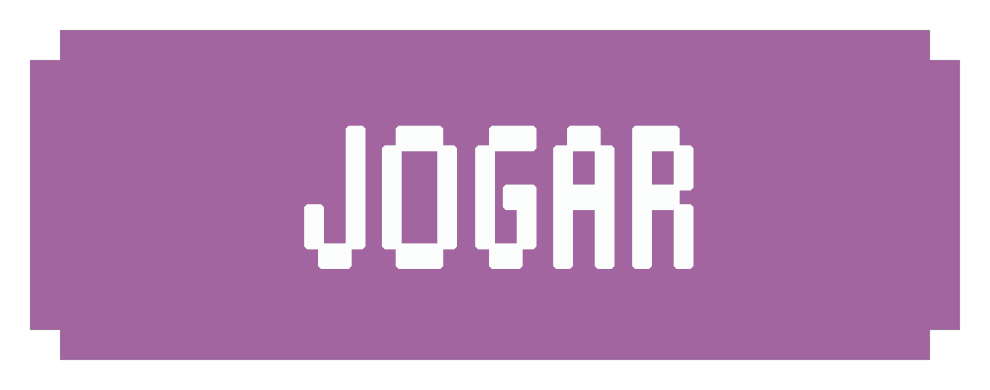
<style>
.page{position:relative;width:990px;height:390px;background:#a365a0}
.page>*{position:absolute;margin:0}
.t1{font:255px "Pixelade";letter-spacing:0.025em;color:#fcfefe;font-weight:bold;scale:0.71 1}
</style>
<div class="page">
<p class="t1" style="left:304px;top:125px;width:390px;height:144px">JOGAR</p>
</div>
